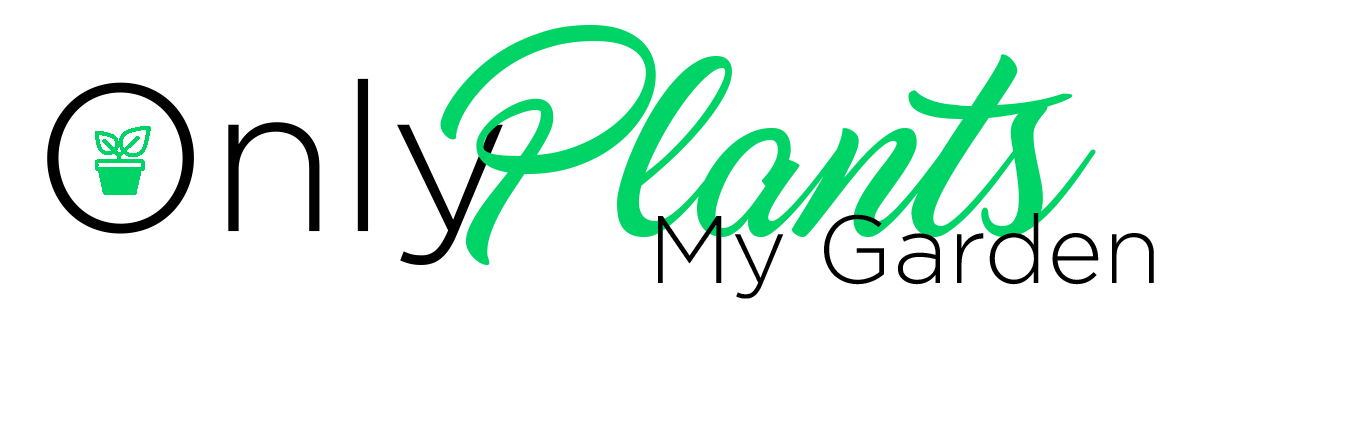
<style>
.page{position:relative;width:1361px;height:425px;background:#ffffff}
.page>*{position:absolute;margin:0}
.t1{font:183.3px "Marguerite";color:#00d466}
.t2{font:208.3px "Gotham-Light";color:#000000}
.t3{font:95.8px "Gotham-Light";color:#000000}
</style>
<div class="page">
<p class="t1" style="left:440px;top:25px;width:656px;height:240px">Plants</p>
<p class="t2" style="left:47px;top:78px;width:456px;height:187px">Only</p>
<p class="t3" style="left:658px;top:213px;width:496px;height:86px">My Garden</p>
</div>
